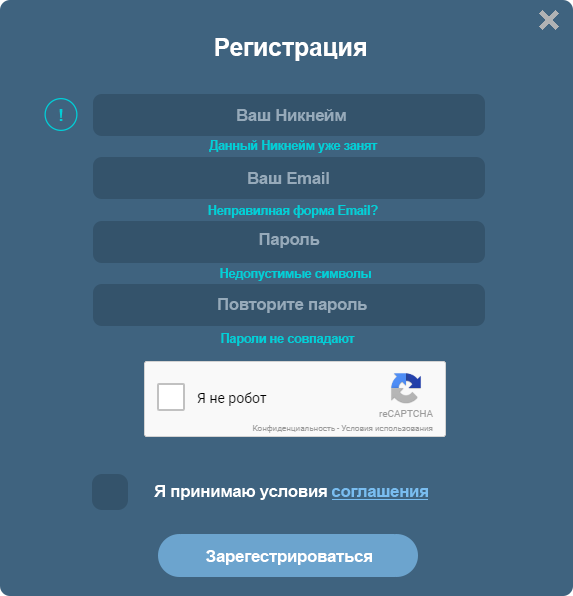
<style>
.page{position:relative;width:573px;height:596px;background:#3f637f}
.page>*{position:absolute;margin:0}
.t1{font:25px "Arial-BoldMT";letter-spacing:-0.01em;color:#ffffff}
.t2{font:16.7px "Arial-BoldMT";letter-spacing:-0.01em;color:#00d0d8}
.t3{font:16.7px "Arial-BoldMT";letter-spacing:-0.01em;color:#96aaba}
.t4{font:12.5px "Arial-BoldMT";letter-spacing:-0.01em;color:#00d0d8}
.t5{font:16.7px "Arial-BoldMT";letter-spacing:-0.01em;color:#79bdf0}
.t6{font:16.7px "Arial-BoldMT";letter-spacing:-0.01em;color:#ffffff}
</style>
<div class="page">
<p class="t1" style="left:215px;top:38px;width:151px;height:23px">Регистрация</p>
<p class="t2" style="left:59px;top:109px;width:4px;height:12px">!</p>
<p class="t3" style="left:237px;top:109px;width:109px;height:12px">Ваш Никнейм</p>
<p class="t4" style="left:209px;top:140px;width:169px;height:13px">Данный Никнейм уже занят</p>
<p class="t3" style="left:248px;top:172px;width:81px;height:12px">Ваш Email</p>
<p class="t4" style="left:208px;top:205px;width:170px;height:13px">Неправилная форма Email?</p>
<p class="t3" style="left:259px;top:233px;width:61px;height:15px">Пароль</p>
<p class="t4" style="left:220px;top:268px;width:151px;height:13px">Недопустимые символы</p>
<p class="t3" style="left:218px;top:298px;width:149px;height:15px">Повторите пароль</p>
<p class="t4" style="left:221px;top:333px;width:134px;height:13px">Пароли не совпадают</p>
<p class="t5" style="left:332px;top:488px;width:96px;height:9px">соглашения</p>
<p class="t6" style="left:206px;top:550px;width:166px;height:15px">Зарегестрироваться</p>
</div>
